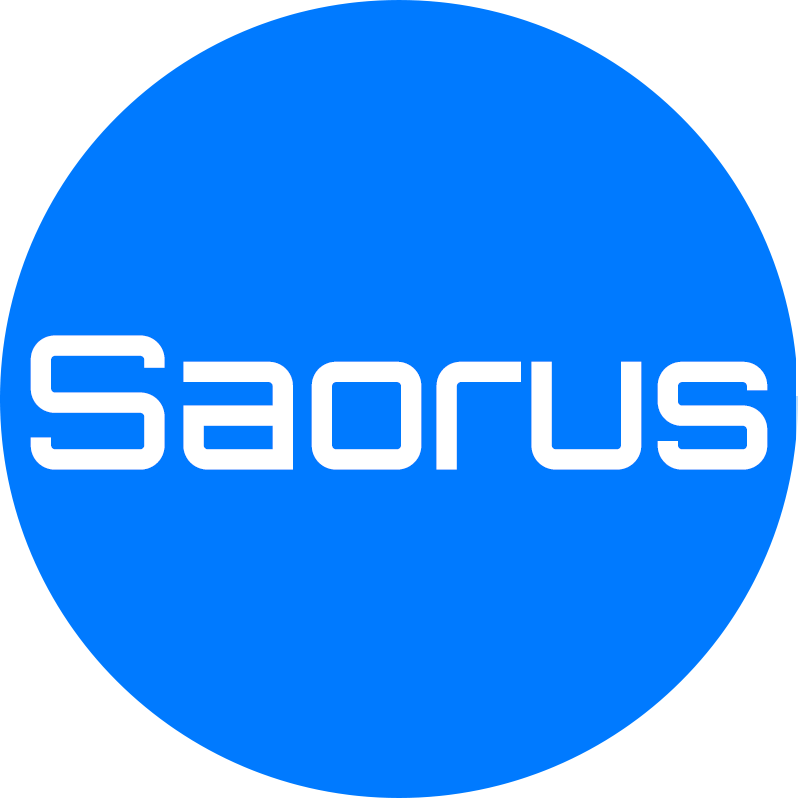
<style>
.page{position:relative;width:798px;height:798px;background:#007aff}
.page>*{position:absolute;margin:0}
.t1{font:185.4px "Orbitron-Medium";color:#ffffff}
</style>
<div class="page">
<p class="t1" style="left:30px;top:335px;width:738px;height:135px">Saorus</p>
</div>
